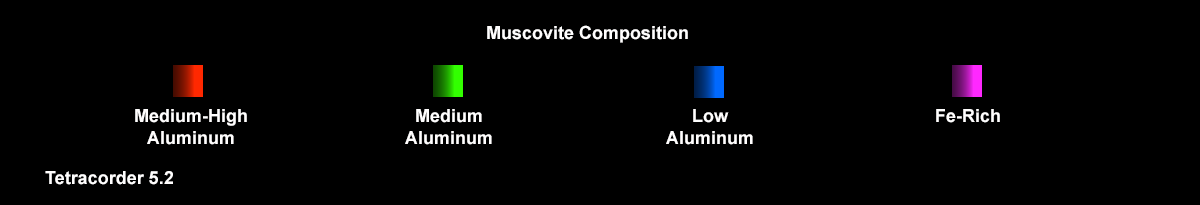
<style>
.page{position:relative;width:1200px;height:205px;background:#000000}
.page>*{position:absolute;margin:0}
.t1{font:18px "Arial-BoldMT";color:#fffefe}
</style>
<div class="page">
<p class="t1" style="left:487px;top:25px;width:201px;height:18px">Muscovite Composition</p>
<p class="t1" style="left:135px;top:109px;width:112px;height:36px;text-align:center">Medium-High<br>Aluminum</p>
<p class="t1" style="left:405px;top:109px;width:87px;height:36px;text-align:center">Medium<br>Aluminum</p>
<p class="t1" style="left:666px;top:109px;width:87px;height:36px;text-align:center">Low<br>Aluminum</p>
<p class="t1" style="left:936px;top:109px;width:64px;height:14px">Fe-Rich</p>
<p class="t1" style="left:45px;top:171px;width:128px;height:14px">Tetracorder 5.2</p>
</div>
